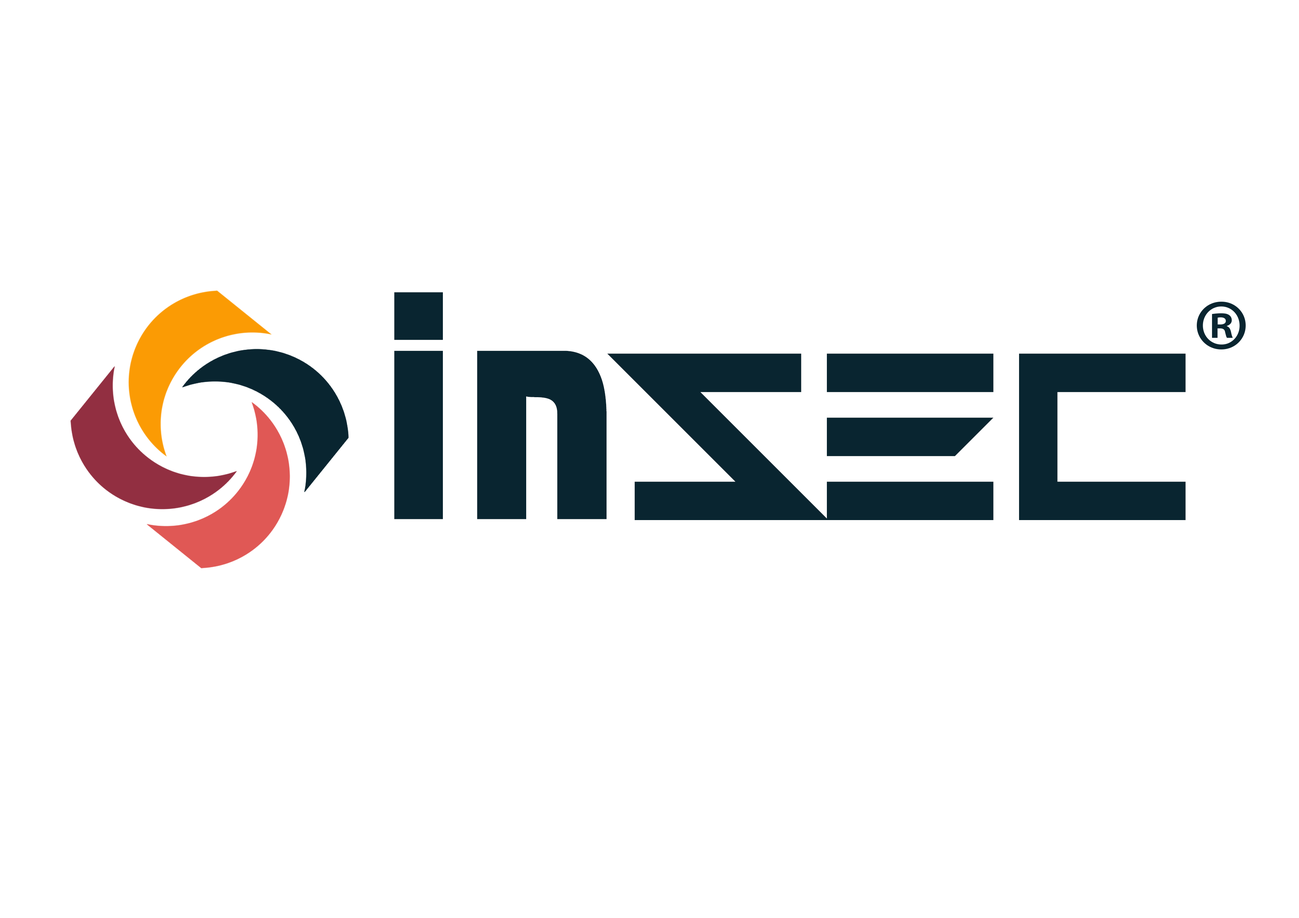
<style>
.page{position:relative;width:1299px;height:918px;background:#ffffff}
.page>*{position:absolute;margin:0}
.t1{font:262.2px "Sparkles";color:#092530}
.t2{font:478.2px "DSNJumPar";color:#092530}
</style>
<div class="page">
<p class="t1" style="left:394px;top:292px;width:791px;height:228px"><span class="t2">in</span>SEC</p>
</div>
